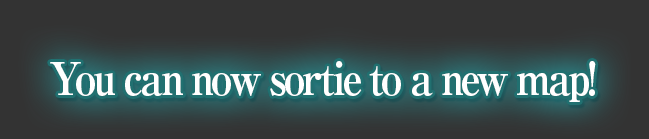
<style>
.page{position:relative;width:649px;height:139px;background:#333333}
.page>*{position:absolute;margin:0}
.t1{font:45px "RyuminPro-ExBold";letter-spacing:-0.08em;color:#ffffff;scale:0.9 1}
</style>
<div class="page">
<p class="t1" style="left:50px;top:61px;width:546px;height:41px">You can now sortie to a new map!</p>
</div>
